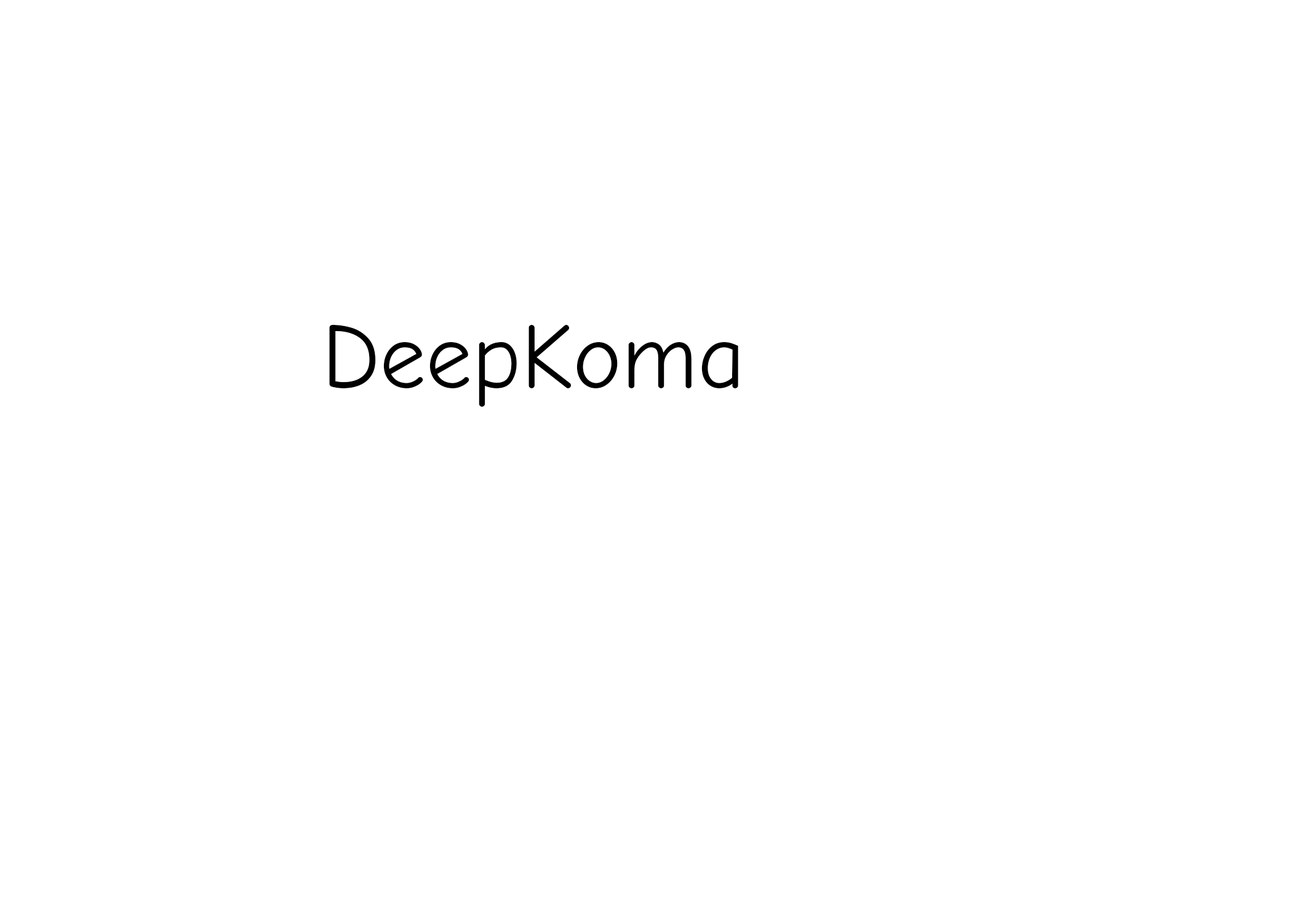
<style>
.page{position:relative;width:1292px;height:923px;background:#ffffff}
.page>*{position:absolute;margin:0}
.t1{font:92.3px "ComicNeue-Regular";color:#000000}
</style>
<div class="page">
<p class="t1" style="left:329px;top:325px;width:409px;height:82px">DeepKoma</p>
</div>
